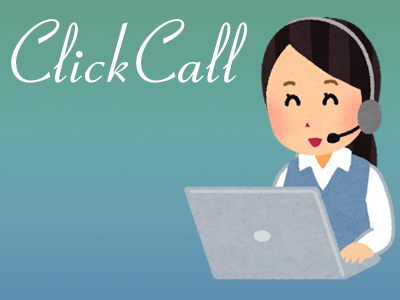
<style>
.page{position:relative;width:400px;height:300px}
.page>*{position:absolute;margin:0}
.t1{font:82.3px "Connecticut";color:#ffffff}
</style>
<div class="page">
<p class="t1" style="left:11px;top:19px;width:236px;height:64px">ClickCall</p>
</div>
